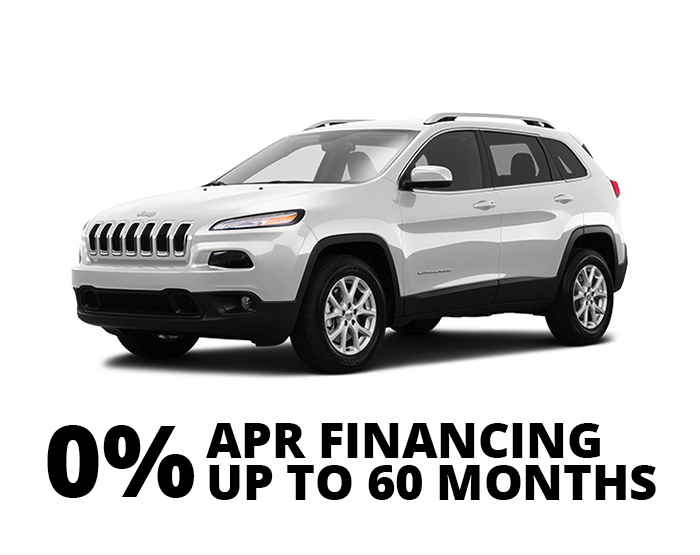
<style>
.page{position:relative;width:700px;height:555px;background:#ffffff}
.page>*{position:absolute;margin:0}
.t1{font:99.5px "OpenSans-Extrabold";color:#000000}
.t2{font:48.8px/42px "OpenSans-Extrabold";color:#000000}
</style>
<div class="page">
<p class="t1" style="left:47px;top:425px;width:147px;height:73px">0%</p>
<p class="t2" style="left:206px;top:423px;width:450px;height:77px">APR FINANCING<br>UP TO 60 MONTHS</p>
</div>
